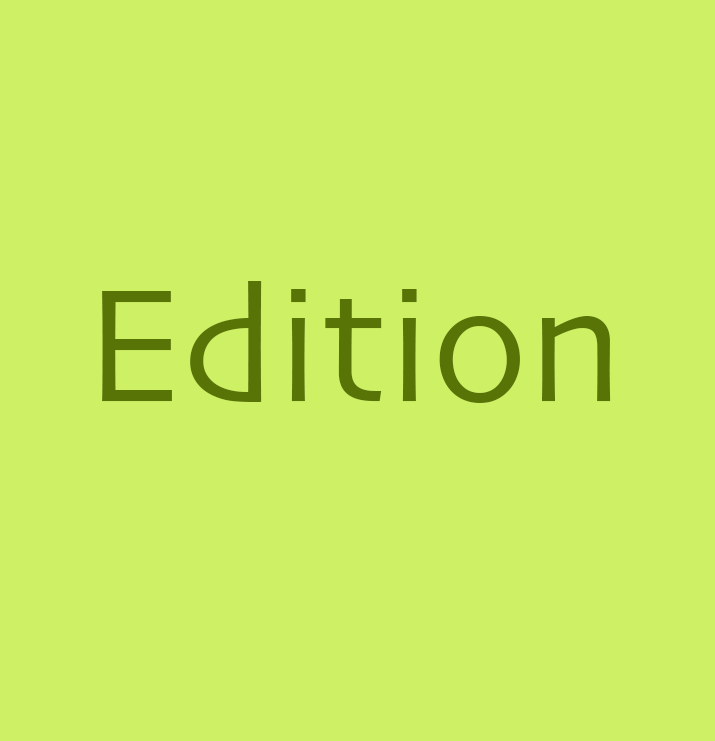
<style>
.page{position:relative;width:715px;height:741px;background:#cdf064}
.page>*{position:absolute;margin:0}
.t1{font:168px "Skia-Regular";color:#597406}
</style>
<div class="page">
<p class="t1" style="left:102px;top:281px;width:509px;height:122px">Edition</p>
</div>
